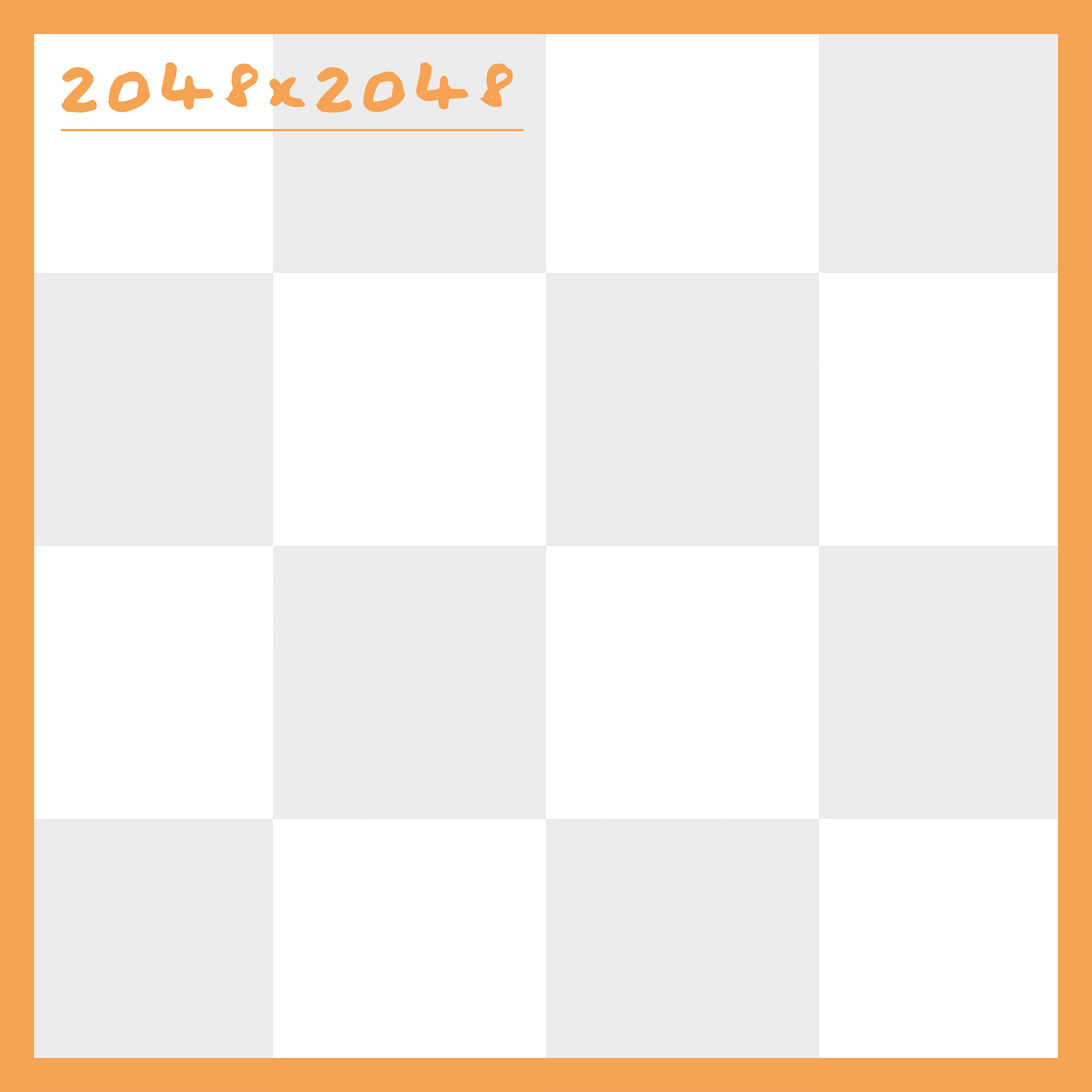
<style>
.page{position:relative;width:1092px;height:1092px;background:#ffffff}
.page>*{position:absolute;margin:0}
.t1{font:80px "MSFse2";letter-spacing:0.12em;color:#f6a354;text-decoration:underline}
</style>
<div class="page">
<p class="t1" style="left:61px;top:62px;width:463px;height:69px">2048x2048</p>
</div>
